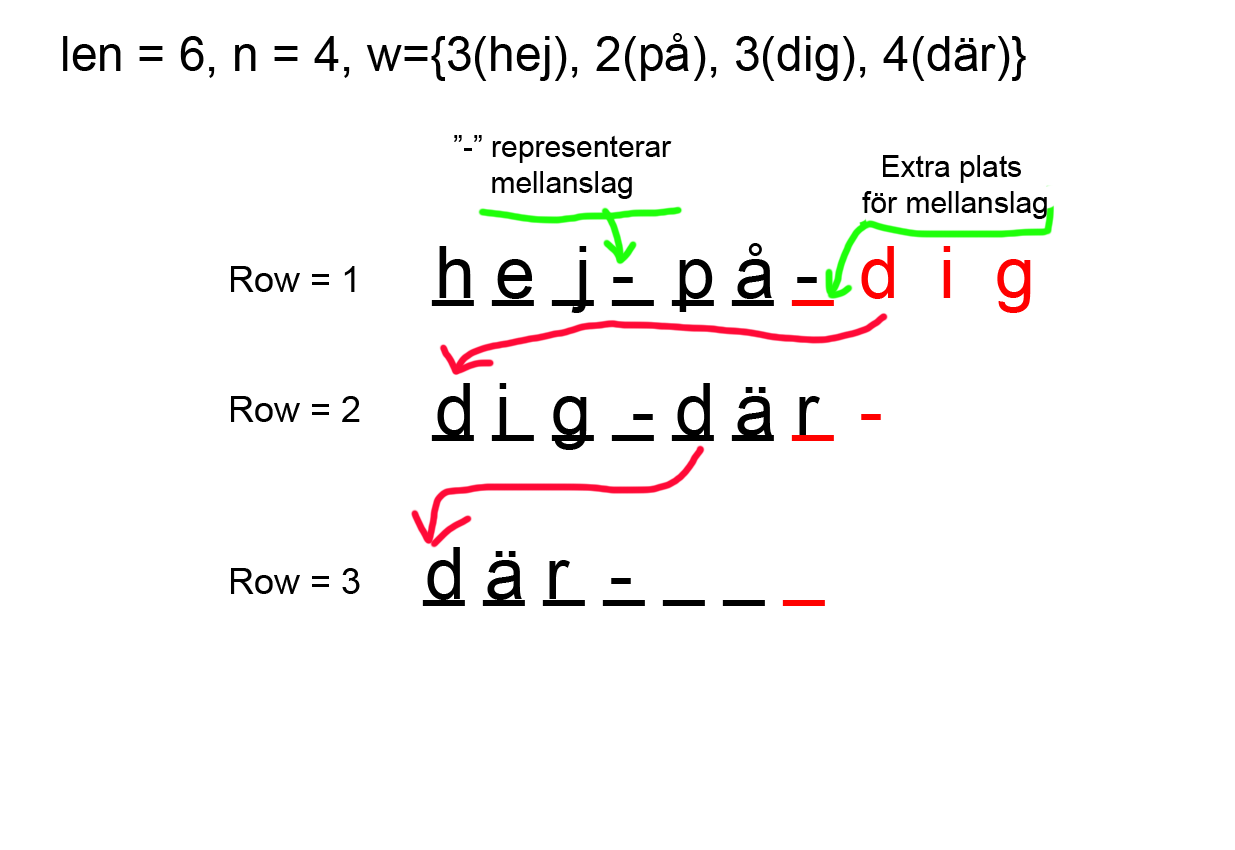
<style>
.page{position:relative;width:1235px;height:850px;background:#ffffff}
.page>*{position:absolute;margin:0}
.t1{font:48px "ArialMT";color:#000000}
.t2{font:30px "ArialMT";color:#000000}
.t3{font:72px "ArialMT";color:#000000}
.t4{font:72px "ArialMT";color:#ff0000}
.t5{font:36px "ArialMT";color:#000000}
.t6{font:72px "ArialMT";color:#ff0200}
</style>
<div class="page">
<p class="t1" style="left:63px;top:33px;width:963px;height:48px">len = 6, n = 4, w={3(hej), 2(på), 3(dig), 4(där)}</p>
<p class="t2" style="left:454px;top:135px;width:218px;height:64px;text-align:center">”-” representerar<br>mellanslag</p>
<p class="t2" style="left:862px;top:155px;width:185px;height:64px;text-align:center">Extra plats <br>för mellanslag</p>
<p class="t3" style="left:439px;top:243px;width:592px;height:70px">h e  j -  p å -  <span class="t4">d  i  g</span></p>
<p class="t5" style="left:231px;top:266px;width:129px;height:328px">Row = 1<br><br><br>Row = 2<br><br><br><br>Row = 3</p>
<p class="t3" style="left:431px;top:300px;width:403px;height:6px">_ _ _ _ _ _ <span class="t6">_</span></p>
<p class="t3" style="left:437px;top:383px;width:444px;height:67px">d i  g  - d ä r  <span class="t4">-</span></p>
<p class="t3" style="left:431px;top:435px;width:403px;height:6px">_ _ _ _ _ _ <span class="t6">_</span></p>
<p class="t3" style="left:427px;top:547px;width:204px;height:53px">d ä r  -</p>
<p class="t3" style="left:422px;top:600px;width:403px;height:6px">_ _ _ _ _ _ <span class="t6">_</span></p>
</div>
